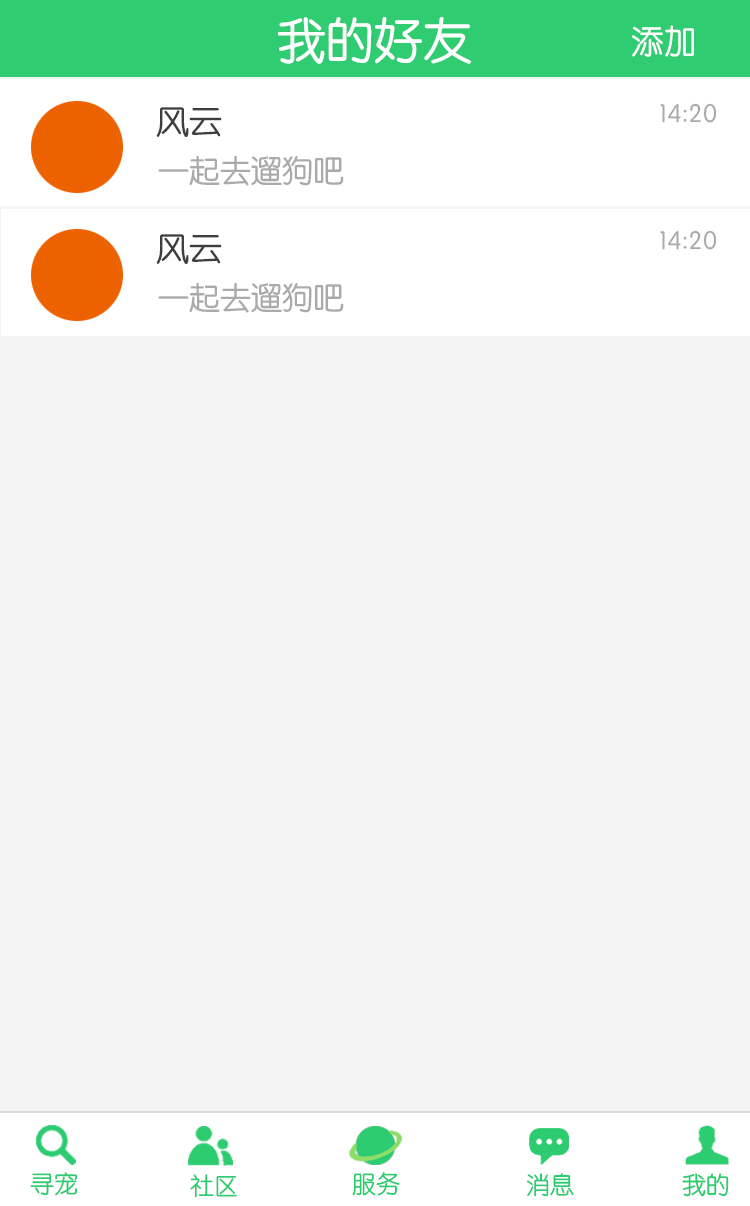
<style>
.page{position:relative;width:750px;height:1206px;background:#f4f4f4}
.page>*{position:absolute;margin:0}
.t1{font:48.7px "STYuanti-SC-Regular";color:#ffffff}
.t2{font:32.7px "STYuanti-SC-Regular";color:#ffffff}
.t3{font:33.3px "STYuanti-SC-Regular";color:#3e3e3e}
.t4{font:26px "STYuanti-SC-Regular";color:#aaaaaa}
.t5{font:31px "STYuanti-SC-Regular";color:#aaaaaa}
.t6{font:24px "STYuanti-SC-Regular";color:#2ecc71}
.t7{font:24px "STYuanti-SC-Regular"}
</style>
<div class="page">
<p class="t1" style="left:278px;top:17px;width:193px;height:47px">我的好友</p>
<p class="t2" style="left:632px;top:25px;width:62px;height:32px">添加</p>
<p class="t3" style="left:156px;top:107px;width:66px;height:30px">风云</p>
<p class="t4" style="left:660px;top:103px;width:57px;height:20px">14:20</p>
<p class="t5" style="left:158px;top:155px;width:186px;height:31px">一起去遛狗吧</p>
<p class="t4" style="left:660px;top:230px;width:57px;height:20px">14:20</p>
<p class="t3" style="left:156px;top:234px;width:66px;height:30px">风云</p>
<p class="t5" style="left:158px;top:282px;width:186px;height:31px">一起去遛狗吧</p>
<p class="t6" style="left:30px;top:1172px;width:48px;height:24px">寻宠</p>
<p class="t6" style="left:190px;top:1174px;width:47px;height:24px">社区</p>
<p class="t7" style="left:352px;top:1173px;width:48px;height:24px">服务</p>
<p class="t6" style="left:352px;top:1172px;width:48px;height:24px">服务</p>
<p class="t7" style="left:526px;top:1173px;width:47px;height:24px">消息</p>
<p class="t6" style="left:527px;top:1173px;width:47px;height:24px">消息</p>
<p class="t6" style="left:682px;top:1173px;width:47px;height:24px">我的</p>
<p class="t6" style="left:682px;top:1173px;width:47px;height:24px">我的</p>
</div>
